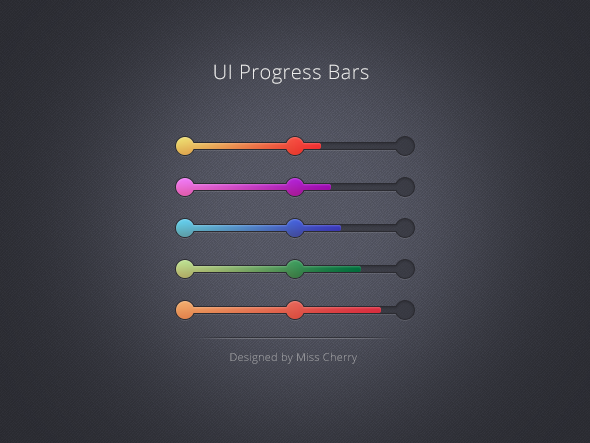
<style>
.page{position:relative;width:590px;height:443px}
.page>*{position:absolute;margin:0}
.t1{font:20px "OpenSans-Light";letter-spacing:0.025em;color:#ececec}
.t2{font:11px "OpenSans-Light";letter-spacing:0.025em}
</style>
<div class="page">
<p class="t1" style="left:214px;top:64px;width:155px;height:20px">UI Progress Bars</p>
<p class="t2" style="left:230px;top:352px;width:127px;height:12px">Designed by Miss Cherry</p>
</div>
